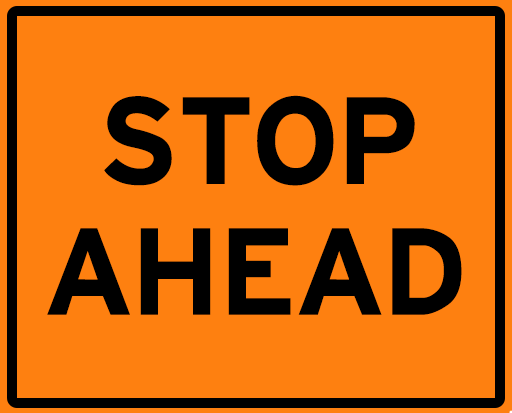
<style>
.page{position:relative;width:512px;height:413px;background:#fe8010}
.page>*{position:absolute;margin:0}
.t1{font:130.9px/130.9px "HittheRoad";color:#000000}
</style>
<div class="page">
<p class="t1" style="left:47px;top:95px;width:415px;height:220px;text-align:center">STOP<br>AHEAD</p>
</div>
